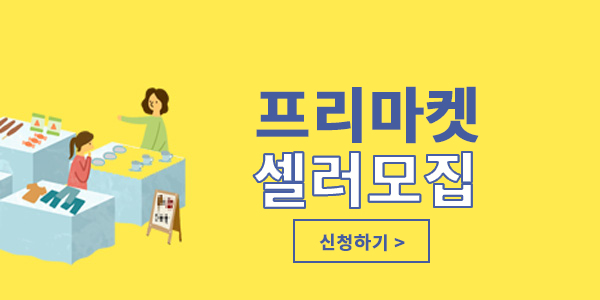
<style>
.page{position:relative;width:600px;height:300px;background:#ffea4f}
.page>*{position:absolute;margin:0}
.t1{font:60px "NotoSansKR-Bold";color:#455d9f;font-weight:bold}
.t2{font:60px "NotoSansKR-Bold";color:#fffffd;font-weight:bold}
.t3{font:18px "NotoSansKR-Bold";color:#455d9f;font-weight:bold}
</style>
<div class="page">
<p class="t1" style="left:256px;top:86px;width:223px;height:58px">프리마켓</p>
<p class="t2" style="left:253px;top:152px;width:219px;height:56px">셀러모집</p>
<p class="t3" style="left:319px;top:233px;width:86px;height:19px">신청하기 &gt;</p>
</div>
